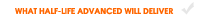
<style>
.page{position:relative;width:200px;height:20px;background:#ffffff}
.page>*{position:absolute;margin:0}
.t1{font:8px "Atlanta-Demi";color:#ff6600}
</style>
<div class="page">
<p class="t1" style="left:15px;top:7px;width:159px;height:8px">WHAT HALF-LIFE ADVANCED WILL DELIVER</p>
</div>
